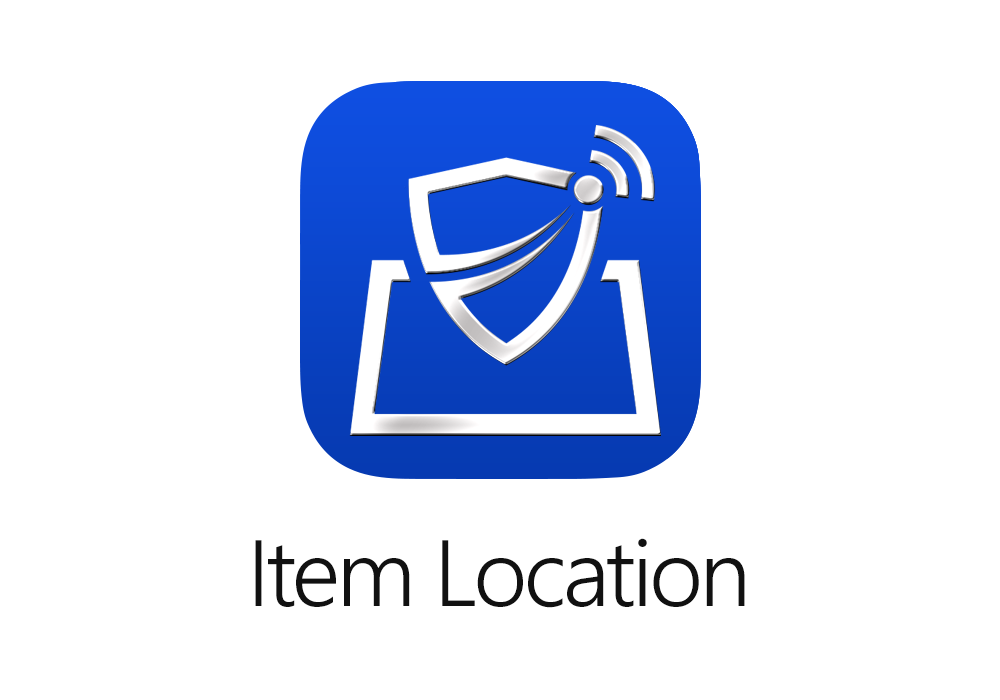
<style>
.page{position:relative;width:1000px;height:700px;background:#ffffff}
.page>*{position:absolute;margin:0}
.t1{font:94px "SegoeUI-Semilight";letter-spacing:-0.04em;color:#111111}
</style>
<div class="page">
<p class="t1" style="left:255px;top:538px;width:490px;height:70px">Item Location</p>
</div>
